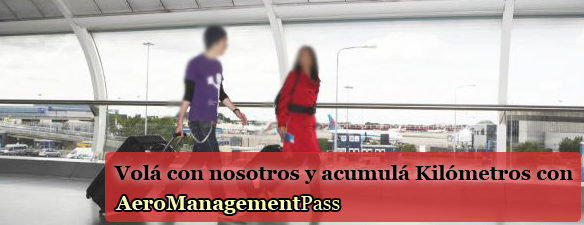
<style>
.page{position:relative;width:584px;height:225px}
.page>*{position:absolute;margin:0}
.t1{font:20px "Georgia-Bold";color:#010000}
.t2{font:20px "Georgia-Bold";color:#fbfbb0}
.t3{font:20px "Georgia";color:#fbfbb0}
</style>
<div class="page">
<p class="t1" style="left:114px;top:165px;width:459px;height:19px">Volá con nosotros y acumulá Kilómetros con</p>
<p class="t2" style="left:115px;top:196px;width:225px;height:18px">AeroManagement<span class="t3">Pass</span></p>
</div>
